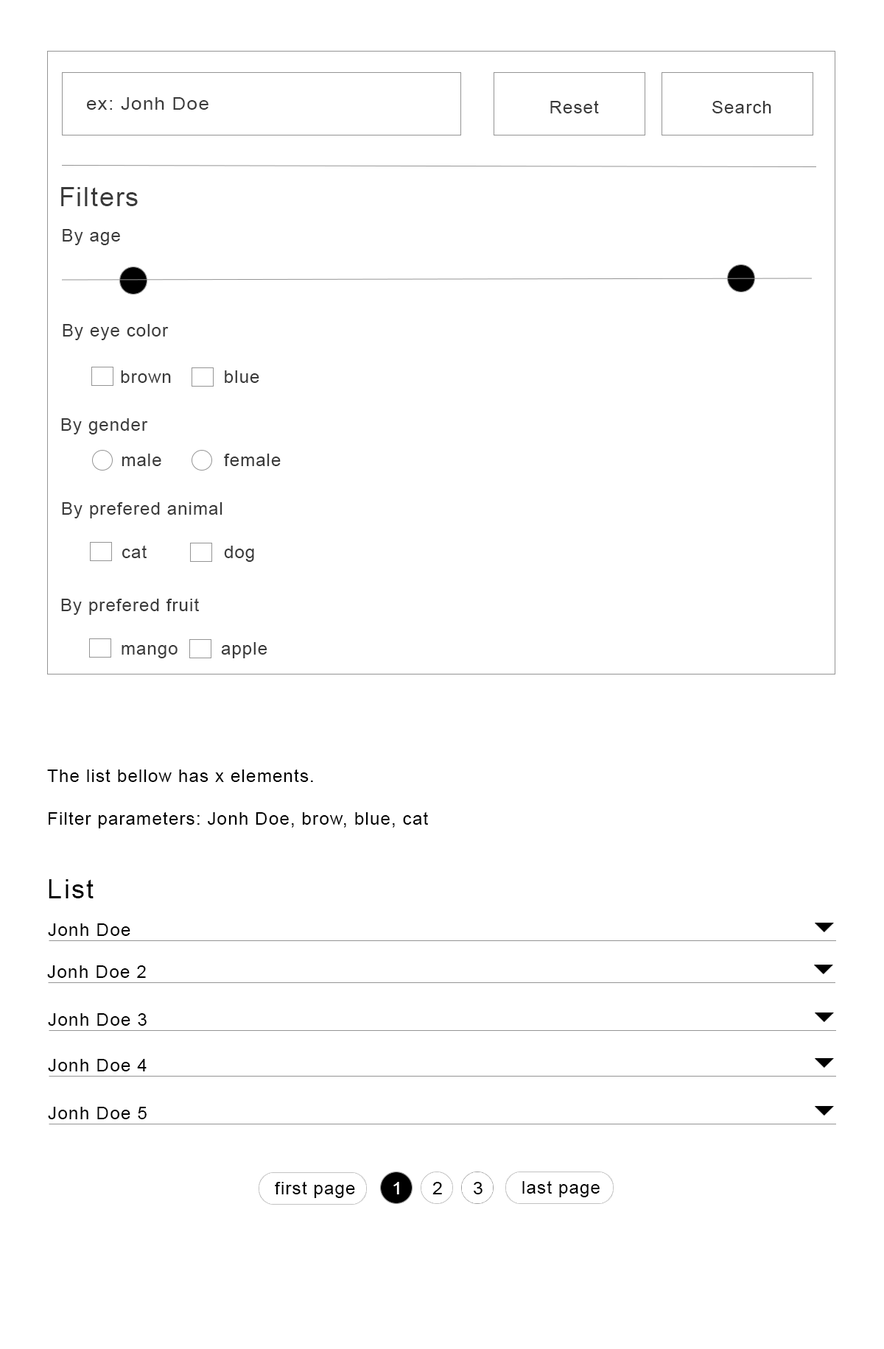
<style>
.page{position:relative;width:884px;height:1349px;background:#ffffff}
.page>*{position:absolute;margin:0}
.t1{font:17.7px "ArialMT";letter-spacing:0.05em;color:#3a3a3a;scale:1.08 1}
.t2{font:17.7px "ArialMT";letter-spacing:0.05em;color:#3a3a3a}
.t3{font:26.5px "ArialMT";letter-spacing:0.05em;color:#3a3a3a}
.t4{font:17.5px "ArialMT";letter-spacing:0.05em;color:#3a3a3a}
.t5{font:17.7px "ArialMT";letter-spacing:0.05em;color:#000000}
.t6{font:26.5px "ArialMT";letter-spacing:0.05em;color:#000000}
.t7{font:17.4px "ArialMT";letter-spacing:0.05em;color:#ffffff;scale:1.05 1}
.t8{font:17.4px "ArialMT";letter-spacing:0.05em;color:#000000;scale:1.05 1}
</style>
<div class="page">
<p class="t1" style="left:87px;top:97px;width:121px;height:13px">ex: Jonh Doe</p>
<p class="t2" style="left:550px;top:100px;width:49px;height:13px">Reset</p>
<p class="t2" style="left:712px;top:101px;width:59px;height:12px">Search</p>
<p class="t3" style="left:61px;top:187px;width:77px;height:19px">Filters</p>
<p class="t2" style="left:63px;top:229px;width:57px;height:16px">By age</p>
<p class="t4" style="left:63px;top:324px;width:106px;height:16px">By eye color</p>
<p class="t4" style="left:121px;top:370px;width:50px;height:13px">brown</p>
<p class="t4" style="left:225px;top:370px;width:34px;height:13px">blue</p>
<p class="t4" style="left:61px;top:418px;width:87px;height:17px">By gender</p>
<p class="t4" style="left:122px;top:454px;width:39px;height:12px">male</p>
<p class="t4" style="left:224px;top:454px;width:57px;height:12px">female</p>
<p class="t4" style="left:62px;top:502px;width:160px;height:16px">By prefered animal</p>
<p class="t4" style="left:122px;top:545px;width:25px;height:13px">cat</p>
<p class="t4" style="left:224px;top:546px;width:30px;height:16px">dog</p>
<p class="t4" style="left:61px;top:598px;width:138px;height:17px">By prefered fruit</p>
<p class="t4" style="left:122px;top:645px;width:55px;height:13px">mango</p>
<p class="t4" style="left:221px;top:642px;width:46px;height:16px">apple</p>
<p class="t5" style="left:47px;top:769px;width:266px;height:13px">The list bellow has x elements.</p>
<p class="t5" style="left:49px;top:812px;width:379px;height:17px">Filter parameters: Jonh Doe, brow, blue, cat</p>
<p class="t6" style="left:49px;top:879px;width:45px;height:20px">List</p>
<p class="t5" style="left:48px;top:924px;width:82px;height:12px">Jonh Doe</p>
<p class="t5" style="left:47px;top:966px;width:99px;height:12px">Jonh Doe 2</p>
<p class="t5" style="left:48px;top:1013px;width:99px;height:13px">Jonh Doe 3</p>
<p class="t5" style="left:48px;top:1059px;width:99px;height:13px">Jonh Doe 4</p>
<p class="t5" style="left:48px;top:1107px;width:99px;height:12px">Jonh Doe 5</p>
<p class="t5" style="left:275px;top:1181px;width:80px;height:17px">first page</p>
<p class="t5" style="left:522px;top:1181px;width:77px;height:17px">last page</p>
<p class="t7" style="left:393px;top:1182px;width:6px;height:13px">1</p>
<p class="t8" style="left:432px;top:1182px;width:10px;height:13px">2</p>
<p class="t8" style="left:474px;top:1182px;width:8px;height:13px">3</p>
</div>
